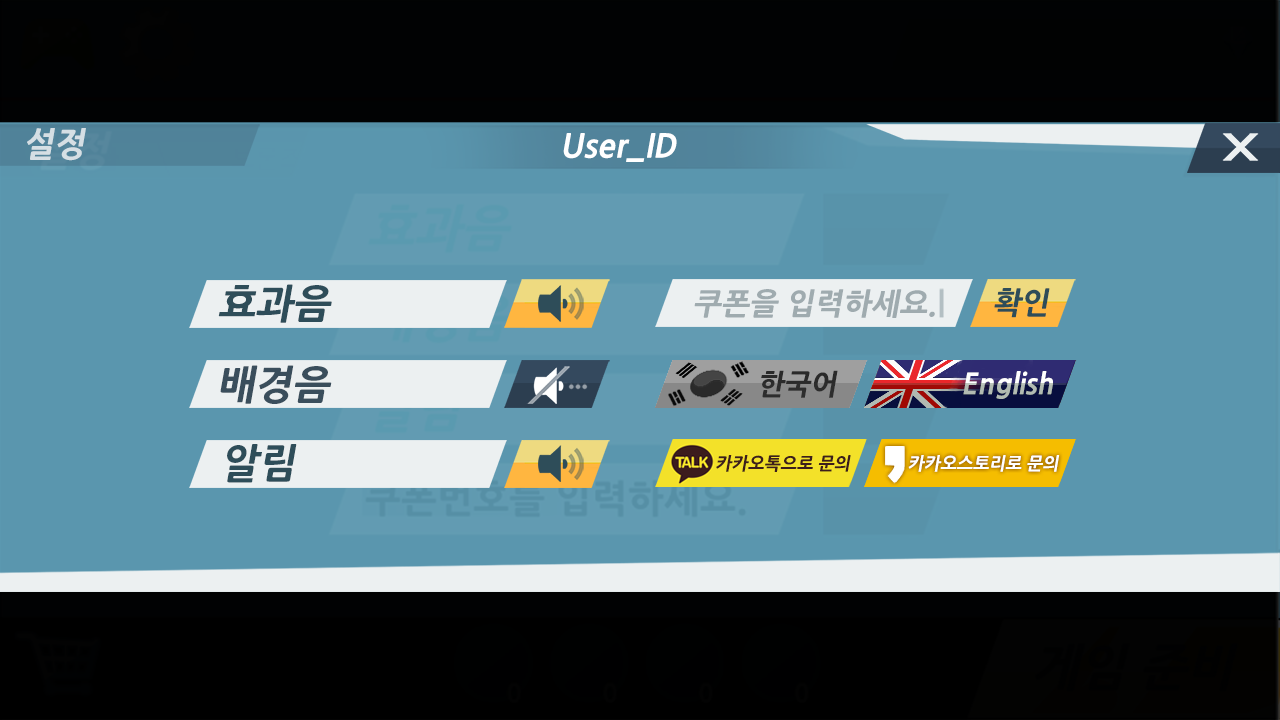
<style>
.page{position:relative;width:1280px;height:720px;background:#5a96ae}
.page>*{position:absolute;margin:0}
.t1{font:33.2px "NanumGothicExtraBold";color:#d5dfe4;font-style:italic}
.t2{font:31.9px "NanumGothicExtraBold";color:#ffffff;font-style:italic}
.t3{font:39.8px "NanumGothicExtraBold";color:#2e4d59;font-style:italic}
.t4{font:29.9px "NanumGothicExtraBold";color:#9fabaf;font-style:italic}
.t5{font:30px "NanumGothicExtraBold";color:#2e4d59;font-style:italic}
.t6{font:39.8px "NanumGothicExtraBold";color:#3a4e5c;font-style:italic}
.t7{font:28.3px "NanumGothicExtraBold";color:#2a2a2a;font-style:italic}
.t8{font:28.3px "NanumGothicExtraBold";font-style:italic}
.t9{font:17.6px "NanumGothicExtraBold";color:#3c1e1c;font-style:italic}
.t10{font:17.6px "NanumGothicExtraBold";color:#ffffff;font-style:italic}
</style>
<div class="page">
<p class="t1" style="left:27px;top:128px;width:59px;height:33px">설정</p>
<p class="t2" style="left:563px;top:133px;width:114px;height:29px">User_ID</p>
<p class="t3" style="left:218px;top:284px;width:114px;height:39px">효과음</p>
<p class="t4" style="left:694px;top:289px;width:241px;height:29px">쿠폰을 입력하세요.</p>
<p class="t5" style="left:994px;top:288px;width:56px;height:30px">확인</p>
<p class="t6" style="left:220px;top:365px;width:112px;height:39px">배경음</p>
<p class="t7" style="left:761px;top:370px;width:77px;height:28px">한국어</p>
<p class="t8" style="left:963px;top:371px;width:90px;height:28px">English</p>
<p class="t3" style="left:227px;top:444px;width:70px;height:39px">알림</p>
<p class="t9" style="left:716px;top:455px;width:135px;height:17px">카카오톡으로 문의</p>
<p class="t10" style="left:908px;top:455px;width:152px;height:17px">카카오스토리로 문의</p>
</div>
